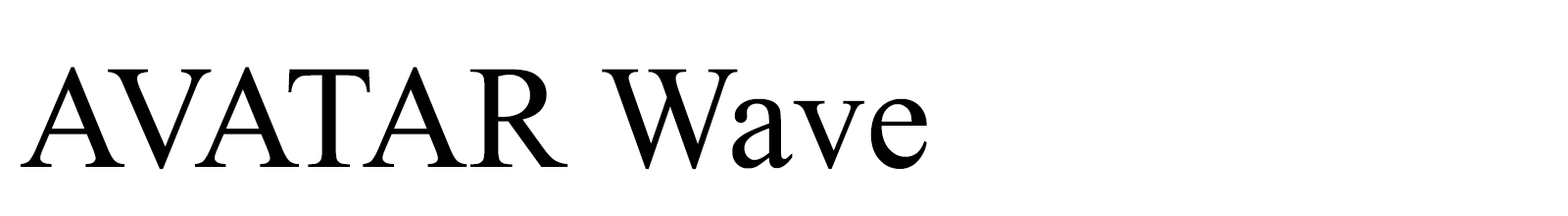
<style>
.page{position:relative;width:1568px;height:216px;background:#ffffff}
.page>*{position:absolute;margin:0}
.t1{font:147px "TimesNewRomanPSMT";color:#000000}
</style>
<div class="page">
<p class="t1" style="left:21px;top:67px;width:906px;height:103px">AVATAR Wave</p>
</div>
